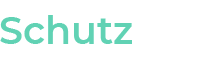
<style>
.page{position:relative;width:200px;height:60px;background:#ffffff}
.page>*{position:absolute;margin:0}
.t1{font:38px "Montserrat-SemiBold";color:#61d2b4}
</style>
<div class="page">
<p class="t1" style="left:0px;top:15px;width:132px;height:29px">Schutz</p>
</div>
